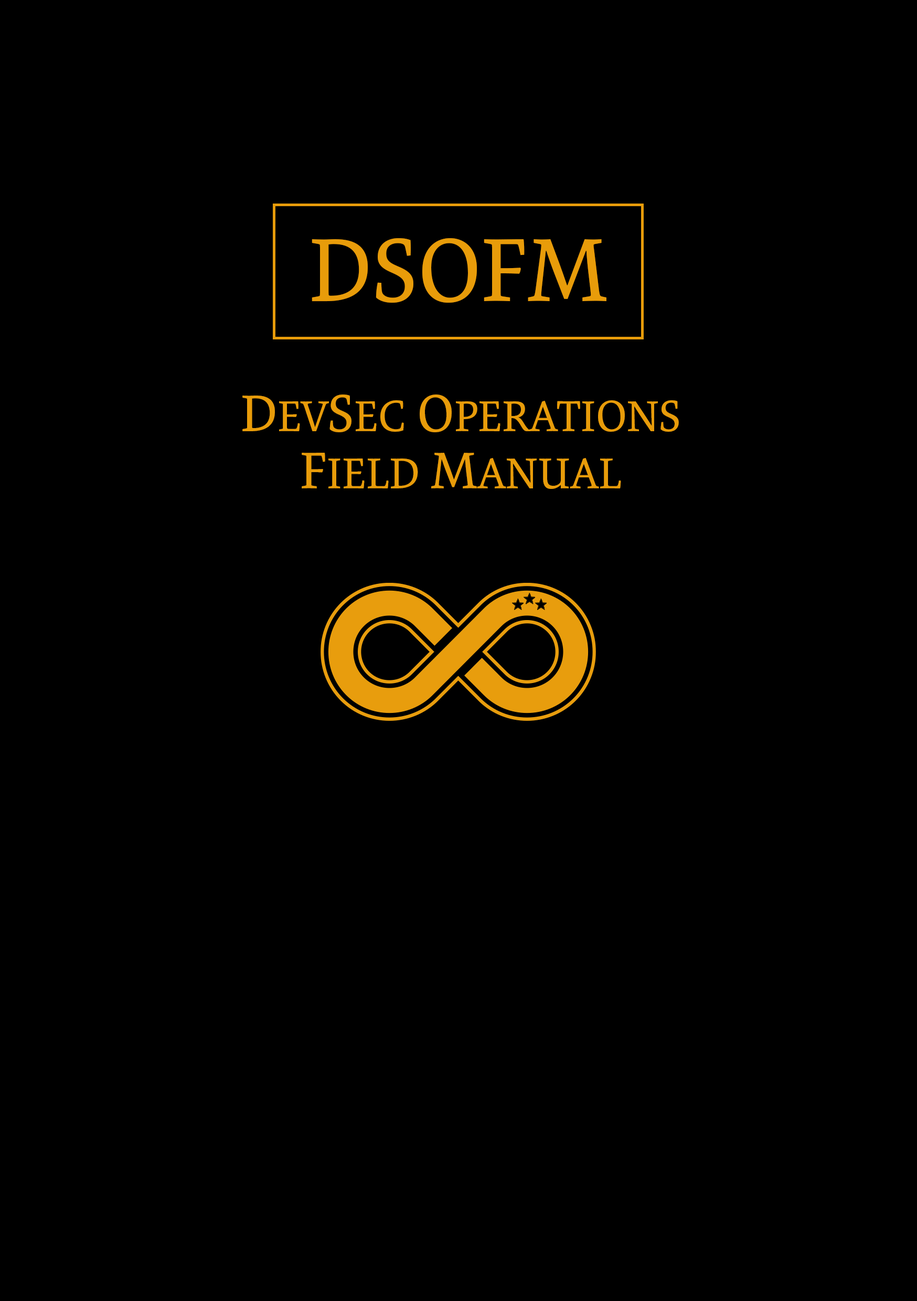
<style>
.page{position:relative;width:917px;height:1301px;background:#000000}
.page>*{position:absolute;margin:0}
.t1{font:90.2px "ExpoSerifPro-Regular";color:#e89c0a}
.t2{font:43.7px/56.8px "ExpoSerifPro-Regular";color:#e89c0a}
.t3{font:52.4px/56.8px "ExpoSerifPro-Regular";color:#e89c0a}
</style>
<div class="page">
<p class="t1" style="left:312px;top:238px;width:294px;height:65px">DSOFM</p>
<p class="t2" style="left:242px;top:394px;width:437px;height:95px;text-align:center"><span class="t3">D</span>EV<span class="t3">S</span>EC <span class="t3">O</span>PERATIONS <br><span class="t3">F</span>IELD <span class="t3">M</span>ANUAL</p>
</div>
